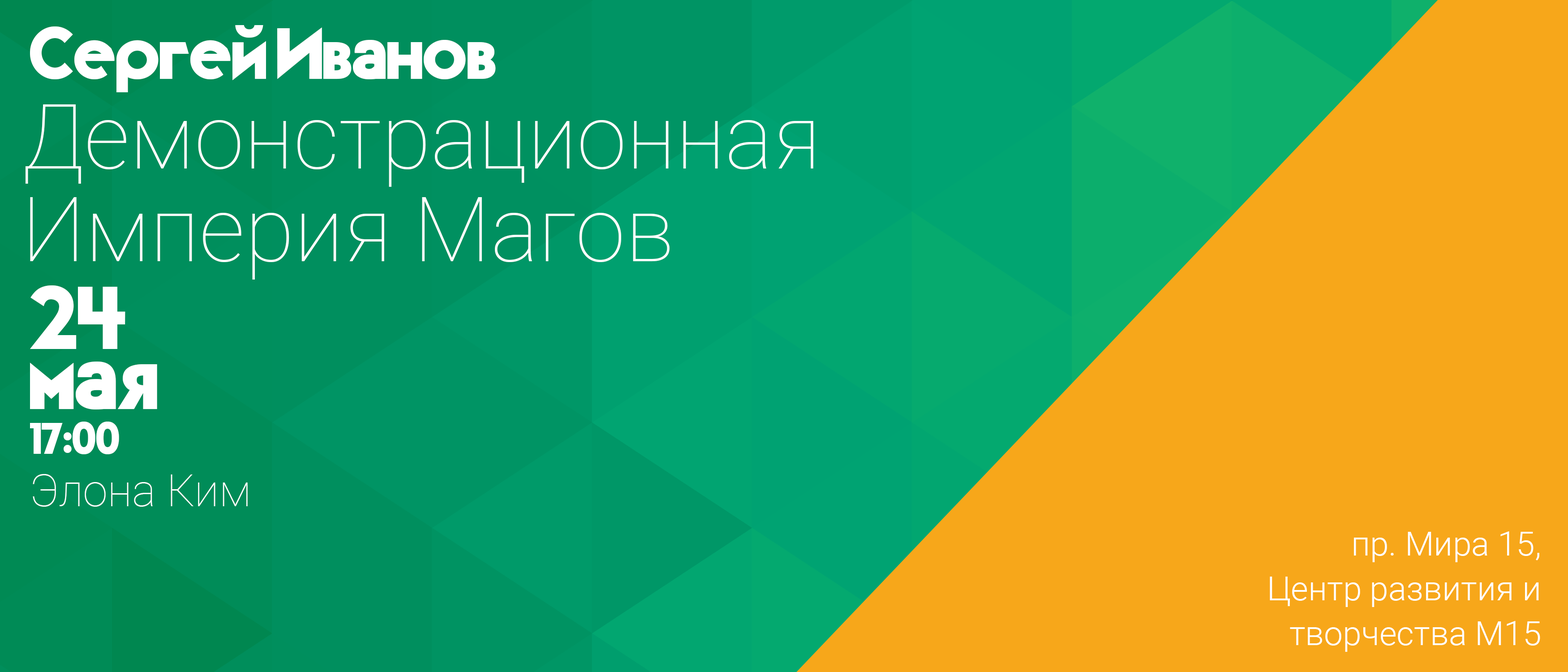
<style>
.page{position:relative;width:1568px;height:672px;background:#f7a71a}
.page>*{position:absolute;margin:0}
.t1{font:72.9px "TypoGraphica";color:#ffffff}
.t2{font:90.1px/305.5px "Roboto-Thin";color:#ffffff}
.t3{font:90.1px/92.7px "Roboto-Thin";color:#ffffff}
.t4{font:44.8px/44.8px "TypoGraphica";color:#ffffff}
.t5{font:89.6px/80.3px "TypoGraphica";color:#ffffff}
.t6{font:89.6px/59.7px "TypoGraphica";color:#ffffff}
.t7{font:44.8px "Roboto-Thin";color:#ffffff}
.t8{font:33.6px/44.8px "Roboto-Light";color:#ffffff}
</style>
<div class="page">
<p class="t1" style="left:30px;top:25px;width:466px;height:67px">Сергей Иванов</p>
<p class="t2" style="left:26px;top:104px;width:787px;height:175px">Демонстрационная<br><span class="t3">Империя Магов</span></p>
<p class="t4" style="left:30px;top:285px;width:127px;height:169px"><span class="t5">24<br></span><span class="t6">мая<br></span>17:00</p>
<p class="t7" style="left:33px;top:474px;width:215px;height:33px">Элона Ким</p>
<p class="t8" style="left:1270px;top:531px;width:270px;height:121px;text-align:right">пр. Мира 15, <br>Центр развития и творчества М15</p>
</div>
